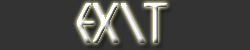
<style>
.page{position:relative;width:250px;height:50px;background:#333333}
.page>*{position:absolute;margin:0}
.t1{font:48px "exoziti";font-weight:bold}
</style>
<div class="page">
<p class="t1" style="left:77px;top:3px;width:90px;height:40px">EXIT</p>
</div>
